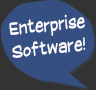
<style>
.page{position:relative;width:96px;height:90px;background:#364f82}
.page>*{position:absolute;margin:0}
.t1{font:19px "SuplexmentaryComicNC";color:#ffffff;scale:0.8 1}
</style>
<div class="page">
<p class="t1" style="left:9px;top:14px;width:77px;height:44px;rotate:-6deg">Enterprise<br>Software!</p>
</div>
